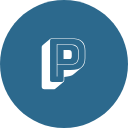
<style>
.page{position:relative;width:128px;height:128px;background:#2c698d}
.page>*{position:absolute;margin:0}
.t1{font:60px "BungeeShade-Regular";color:#ffffff}
</style>
<div class="page">
<p class="t1" style="left:41px;top:38px;width:45px;height:52px">p</p>
</div>
